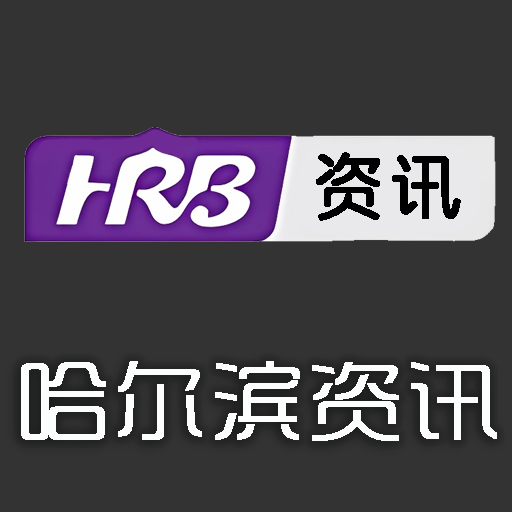
<style>
.page{position:relative;width:512px;height:512px;background:#333333}
.page>*{position:absolute;margin:0}
.t1{font:73.3px "SJyuantijian-Z-Regular";letter-spacing:0.02em;color:#000000;font-weight:bold}
.t2{font:93.3px "SJshishang-Regular";letter-spacing:0.02em;color:#fcfdfd;font-weight:bold}
</style>
<div class="page">
<p class="t1" style="left:316px;top:152px;width:145px;height:69px">资讯</p>
<p class="t2" style="left:21px;top:361px;width:476px;height:80px">哈尔滨资讯</p>
</div>
